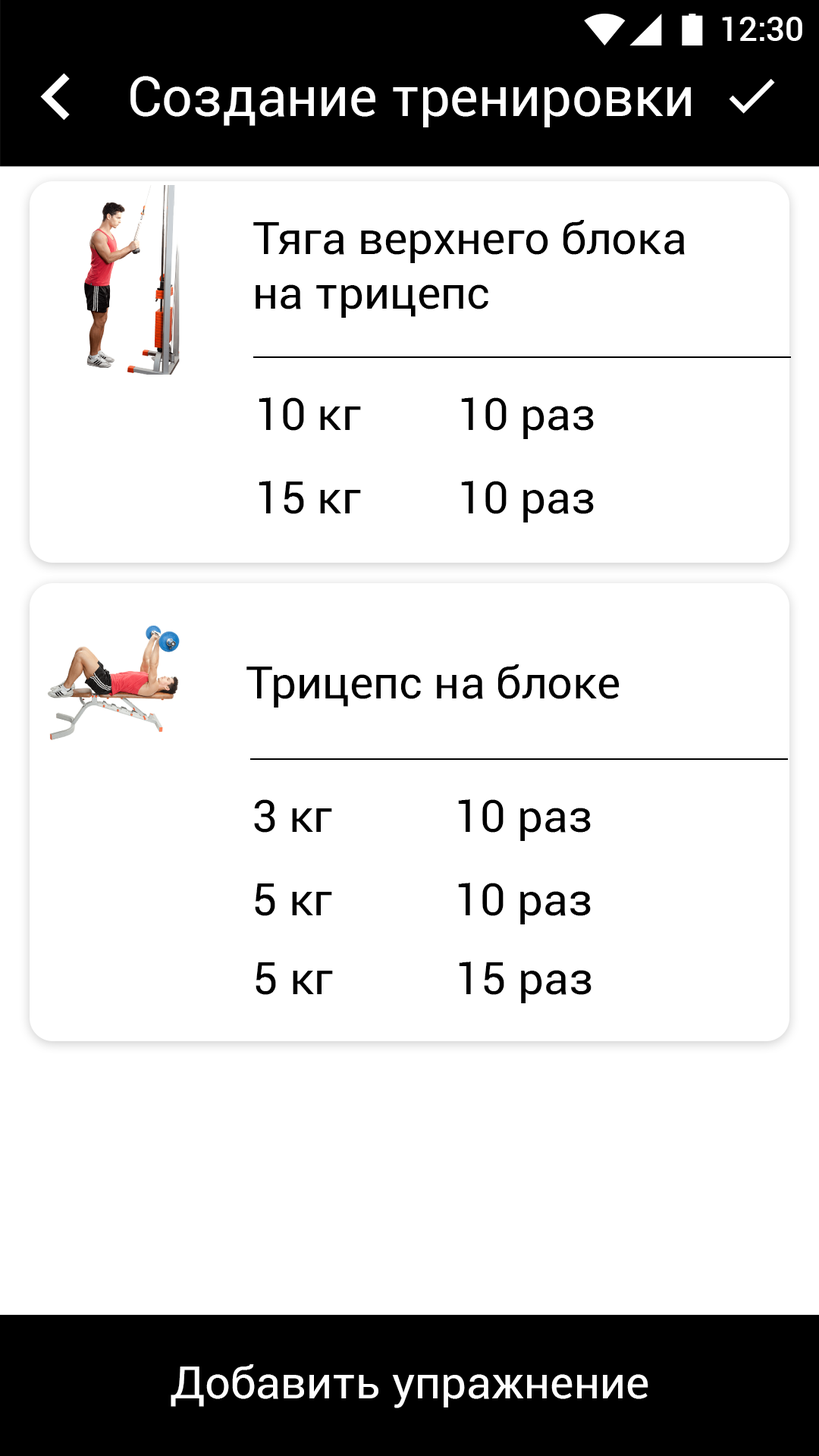
<style>
.page{position:relative;width:819px;height:1456px;background:#ffffff}
.page>*{position:absolute;margin:0}
.t1{font:33.4px "Roboto-Medium";color:#ffffff}
.t2{font:54.6px "Roboto-Regular";color:#ffffff}
.t3{font:45.5px "Roboto-Regular";color:#000000}
.t4{font:45.5px "Roboto-Regular";color:#ffffff}
</style>
<div class="page">
<p class="t1" style="left:722px;top:17px;width:80px;height:24px">12:30</p>
<p class="t2" style="left:130px;top:76px;width:561px;height:51px">Создание тренировки</p>
<p class="t3" style="left:253px;top:220px;width:432px;height:98px">Тяга верхнего блока<br>на трицепс</p>
<p class="t3" style="left:259px;top:397px;width:102px;height:34px">10 кг</p>
<p class="t3" style="left:461px;top:397px;width:133px;height:42px">10 раз</p>
<p class="t3" style="left:259px;top:481px;width:102px;height:33px">15 кг</p>
<p class="t3" style="left:461px;top:481px;width:133px;height:41px">10 раз</p>
<p class="t3" style="left:246px;top:664px;width:374px;height:44px">Трицепс на блоке</p>
<p class="t3" style="left:254px;top:799px;width:78px;height:34px">3 кг</p>
<p class="t3" style="left:458px;top:799px;width:133px;height:42px">10 раз</p>
<p class="t3" style="left:255px;top:883px;width:77px;height:33px">5 кг</p>
<p class="t3" style="left:458px;top:883px;width:133px;height:41px">10 раз</p>
<p class="t3" style="left:256px;top:962px;width:77px;height:33px">5 кг</p>
<p class="t3" style="left:459px;top:962px;width:132px;height:41px">15 раз</p>
<p class="t4" style="left:171px;top:1364px;width:477px;height:44px">Добавить упражнение</p>
</div>
